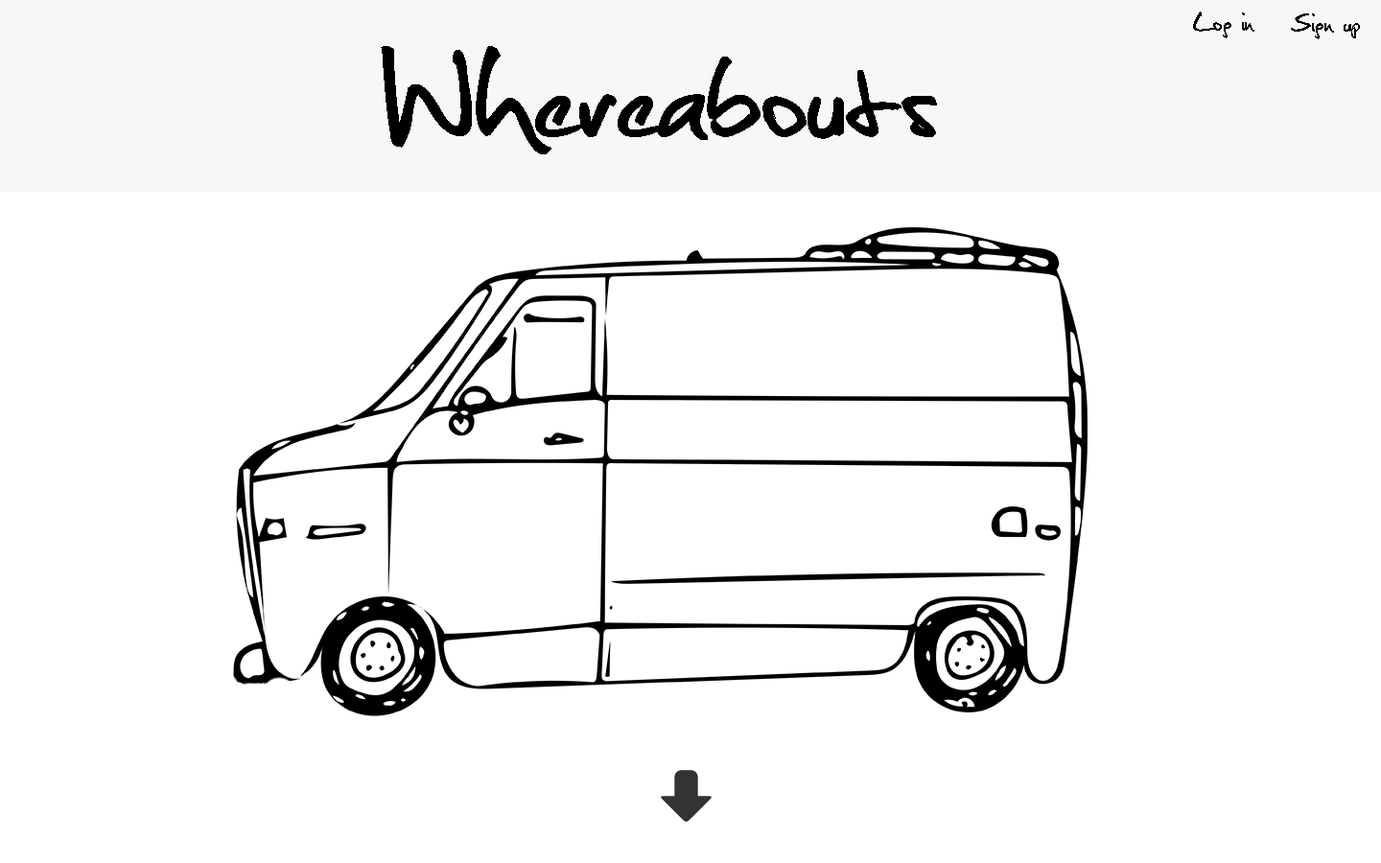
<style>
.page{position:relative;width:1381px;height:863px;background:#ffffff}
.page>*{position:absolute;margin:0}
.t1{font:34.5px "Christopherhand";color:#000000}
.t2{font:170.7px "Christopherhand";color:#000000}
</style>
<div class="page">
<p class="t1" style="left:1193px;top:12px;width:62px;height:26px">Log in</p>
<p class="t1" style="left:1291px;top:13px;width:69px;height:26px">Sign up</p>
<p class="t2" style="left:381px;top:46px;width:556px;height:108px">Whereabouts</p>
</div>
